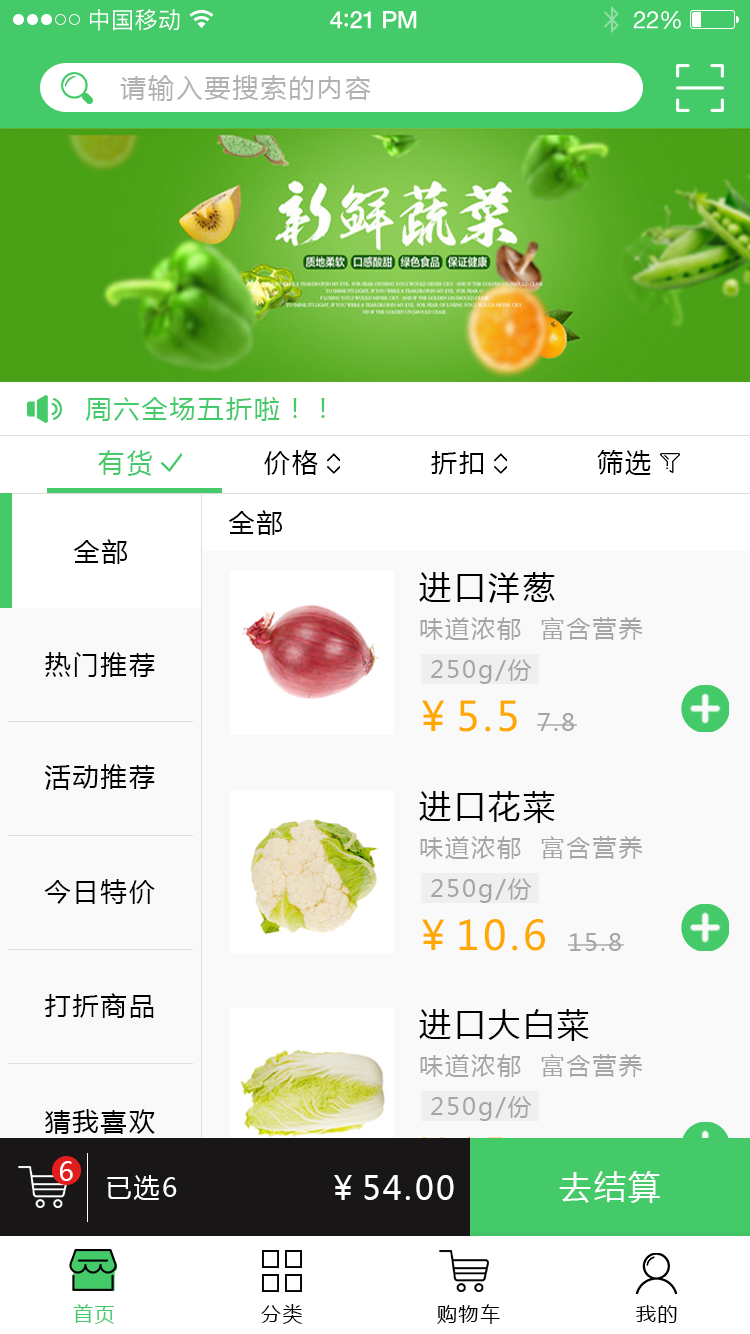
<style>
.page{position:relative;width:750px;height:1334px;background:#f9f9f9}
.page>*{position:absolute;margin:0}
.t1{font:23px "PingFangSC-Regular";letter-spacing:0.02em;color:#ffffff}
.t2{font:24px "HelveticaNeue-Medium";letter-spacing:-0.02em;color:#ffffff}
.t3{font:26px "Avenir-Medium";letter-spacing:-0.02em;color:#ffffff}
.t4{font:24px "HelveticaNeue";letter-spacing:-0.02em;color:#ffffff}
.t5{font:26px "MicrosoftYaHei";letter-spacing:0.08em;color:#b1b1b1;text-transform:uppercase}
.t6{font:26px "MicrosoftYaHei";letter-spacing:0.08em;color:#44ca68;text-transform:uppercase}
.t7{font:26px "MicrosoftYaHei";letter-spacing:0.08em;color:#000000;text-transform:uppercase}
.t8{font:32px "MicrosoftYaHei";letter-spacing:0.08em;color:#000000;text-transform:uppercase}
.t9{font:24px "MicrosoftYaHei";letter-spacing:0.08em;color:#a5a5a5;text-transform:uppercase}
.t10{font:24px "MicrosoftYaHei";letter-spacing:0.08em;color:#a5a5a5}
.t11{font:40.4px "MicrosoftYaHei";letter-spacing:0.08em;color:#ffa800;text-transform:uppercase}
.t12{font:26px "MicrosoftYaHei";letter-spacing:0.08em;color:#ffffff;text-transform:uppercase}
.t13{font:32px "MicrosoftYaHei";letter-spacing:0.08em;color:#ffffff;text-transform:uppercase}
.t14{font:20px "MicrosoftYaHei";letter-spacing:0.08em;color:#44ca68;text-transform:uppercase}
.t15{font:20px "MicrosoftYaHei";letter-spacing:0.08em;color:#000000;text-transform:uppercase}
</style>
<div class="page">
<p class="t1" style="left:90px;top:9px;width:90px;height:22px">中国移动</p>
<p class="t2" style="left:330px;top:11px;width:87px;height:18px">4<span class="t3">:</span>21 PM</p>
<p class="t4" style="left:633px;top:11px;width:48px;height:18px">22%</p>
<p class="t5" style="left:120px;top:75px;width:251px;height:26px">请输入要搜索的内容</p>
<p class="t6" style="left:85px;top:397px;width:240px;height:24px">周六全场五折啦！！</p>
<p class="t6" style="left:98px;top:450px;width:54px;height:26px">有货</p>
<p class="t7" style="left:264px;top:450px;width:54px;height:25px">价格</p>
<p class="t7" style="left:431px;top:451px;width:52px;height:24px">折扣</p>
<p class="t7" style="left:597px;top:450px;width:54px;height:25px">筛选</p>
<p class="t7" style="left:228px;top:510px;width:54px;height:25px">全部</p>
<p class="t7" style="left:73px;top:539px;width:54px;height:25px">全部</p>
<p class="t8" style="left:419px;top:572px;width:136px;height:31px">进口洋葱</p>
<p class="t9" style="left:420px;top:617px;width:223px;height:23px">味道浓郁  富含营养</p>
<p class="t7" style="left:45px;top:652px;width:110px;height:25px">热门推荐</p>
<p class="t10" style="left:431px;top:659px;width:101px;height:25px">250g/份</p>
<p class="t11" style="left:422px;top:700px;width:95px;height:32px">￥5.5</p>
<p class="t10" style="left:537px;top:713px;width:40px;height:18px">7.8</p>
<p class="t7" style="left:44px;top:764px;width:111px;height:26px">活动推荐</p>
<p class="t8" style="left:419px;top:791px;width:136px;height:32px">进口花菜</p>
<p class="t9" style="left:420px;top:836px;width:223px;height:23px">味道浓郁  富含营养</p>
<p class="t7" style="left:44px;top:879px;width:111px;height:25px">今日特价</p>
<p class="t10" style="left:431px;top:878px;width:101px;height:25px">250g/份</p>
<p class="t11" style="left:422px;top:919px;width:123px;height:32px">￥10.6</p>
<p class="t10" style="left:568px;top:933px;width:56px;height:18px">15.8</p>
<p class="t7" style="left:44px;top:993px;width:110px;height:25px">打折商品</p>
<p class="t8" style="left:419px;top:1009px;width:170px;height:32px">进口大白菜</p>
<p class="t9" style="left:420px;top:1054px;width:223px;height:23px">味道浓郁  富含营养</p>
<p class="t10" style="left:431px;top:1096px;width:101px;height:25px">250g/份</p>
<p class="t7" style="left:45px;top:1109px;width:110px;height:25px">猜我喜欢</p>
<p class="t12" style="left:60px;top:1161px;width:13px;height:20px">6</p>
<p class="t12" style="left:107px;top:1175px;width:70px;height:25px">已选6</p>
<p class="t13" style="left:334px;top:1175px;width:120px;height:25px">￥54.00</p>
<p class="t13" style="left:559px;top:1171px;width:101px;height:32px">去结算</p>
<p class="t14" style="left:73px;top:1304px;width:41px;height:20px">首页</p>
<p class="t15" style="left:261px;top:1304px;width:42px;height:20px">分类</p>
<p class="t15" style="left:437px;top:1304px;width:63px;height:20px">购物车</p>
<p class="t15" style="left:636px;top:1305px;width:41px;height:18px">我的</p>
</div>
